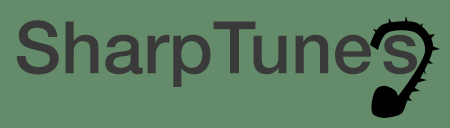
<style>
.page{position:relative;width:450px;height:128px;background:#658c6a}
.page>*{position:absolute;margin:0}
.t1{font:72.5px "HelveticaNeue-Medium";color:#3a3a3a}
</style>
<div class="page">
<p class="t1" style="left:16px;top:20px;width:355px;height:67px">SharpTune</p>
<p class="t1" style="left:383px;top:34px;width:34px;height:41px">s</p>
</div>
